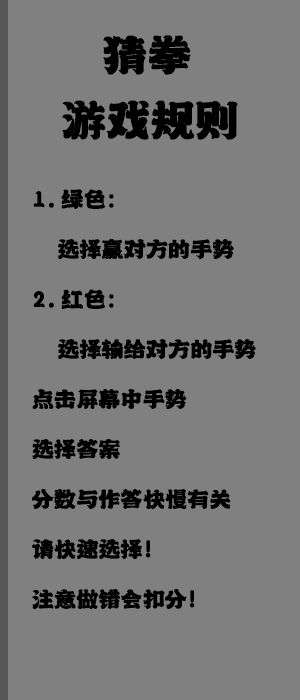
<style>
.page{position:relative;width:300px;height:700px;background:#808080}
.page>*{position:absolute;margin:0}
.t1{font:50px "-";letter-spacing:-0.02em;color:#000000;font-weight:bold}
.t2{font:25px/50px "-";letter-spacing:-0.02em;color:#000000;font-weight:bold}
</style>
<div class="page">
<p class="t1" style="left:103px;top:35px;width:88px;height:40px">猜拳</p>
<p class="t1" style="left:62px;top:100px;width:176px;height:40px">游戏规则</p>
<p class="t2" style="left:32px;top:189px;width:224px;height:420px">1.绿色：<br>  选择赢对方的手势<br>2.红色：<br>  选择输给对方的手势<br>点击屏幕中手势<br>选择答案<br>分数与作答快慢有关<br>请快速选择！<br>注意做错会扣分！</p>
</div>
